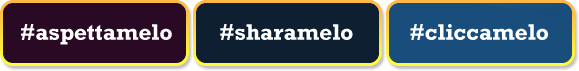
<style>
.page{position:relative;width:579px;height:71px;background:#290924}
.page>*{position:absolute;margin:0}
.t1{font:22.7px "Rockwell-Bold";color:#ffffff}
</style>
<div class="page">
<p class="t1" style="left:21px;top:24px;width:151px;height:21px">#aspettamelo</p>
<p class="t1" style="left:220px;top:24px;width:133px;height:16px">#sharamelo</p>
<p class="t1" style="left:410px;top:24px;width:138px;height:16px">#cliccamelo</p>
</div>
